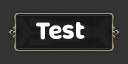
<style>
.page{position:relative;width:128px;height:64px;background:#333333}
.page>*{position:absolute;margin:0}
.t1{font:24px "MilkyNiceClean";color:#fdfdfd}
</style>
<div class="page">
<p class="t1" style="left:36px;top:22px;width:49px;height:18px">Test</p>
</div>
